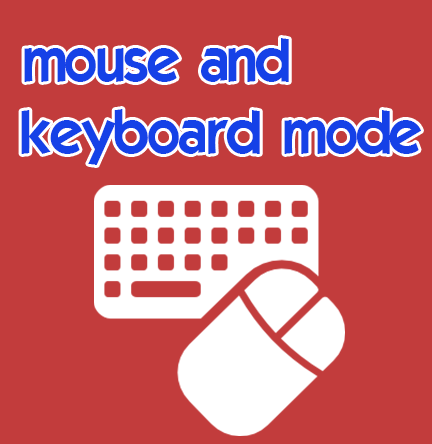
<style>
.page{position:relative;width:432px;height:444px;background:#c23c3c}
.page>*{position:absolute;margin:0}
.t1{font:60px "ELEGANCE";color:#1541e7}
</style>
<div class="page">
<p class="t1" style="left:21px;top:38px;width:400px;height:127px">mouse and<br>keyboard mode</p>
</div>
